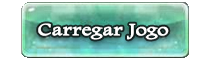
<style>
.page{position:relative;width:210px;height:60px;background:#ffffff}
.page>*{position:absolute;margin:0}
.t1{font:17.6px "FootlightMTLight";color:#ffffff;font-weight:bold;scale:1.25 1}
</style>
<div class="page">
<p class="t1" style="left:38px;top:23px;width:131px;height:17px">Carregar Jogo</p>
</div>
